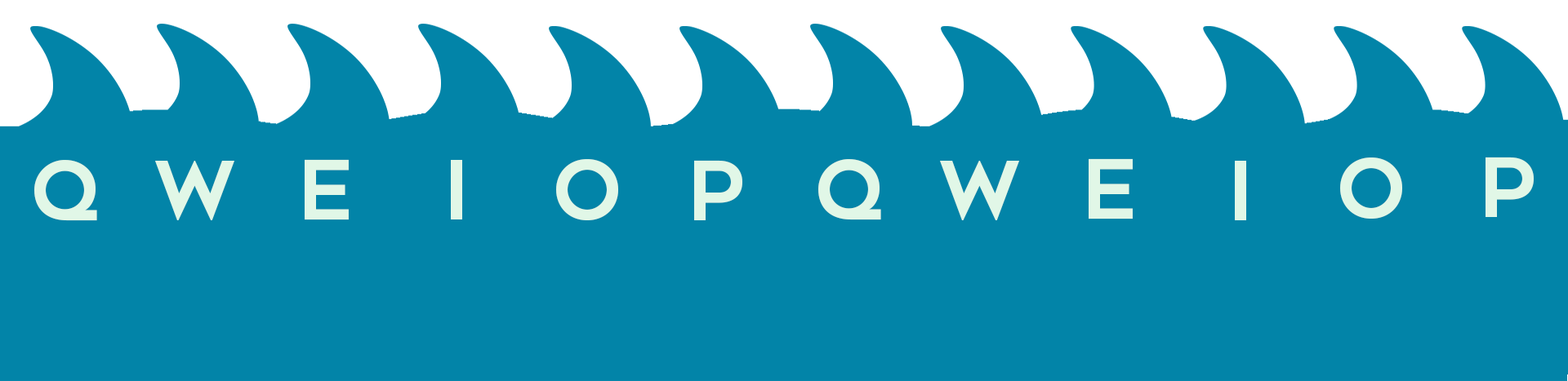
<style>
.page{position:relative;width:1568px;height:381px;background:#0284a8}
.page>*{position:absolute;margin:0}
.t1{font:81.7px "FONTSPRINGDEMO-GeometosNeueBoldRegular";color:#e1f7e7}
</style>
<div class="page">
<p class="t1" style="left:34px;top:160px;width:63px;height:61px">Q</p>
<p class="t1" style="left:155px;top:161px;width:79px;height:59px">W</p>
<p class="t1" style="left:305px;top:159px;width:44px;height:61px">E</p>
<p class="t1" style="left:556px;top:159px;width:62px;height:61px">O</p>
<p class="t1" style="left:694px;top:160px;width:48px;height:60px">P</p>
<p class="t1" style="left:818px;top:159px;width:63px;height:61px">Q</p>
<p class="t1" style="left:940px;top:161px;width:79px;height:59px">W</p>
<p class="t1" style="left:1089px;top:158px;width:44px;height:62px">E</p>
<p class="t1" style="left:1340px;top:158px;width:62px;height:61px">O</p>
<p class="t1" style="left:1486px;top:157px;width:48px;height:60px">P</p>
</div>
